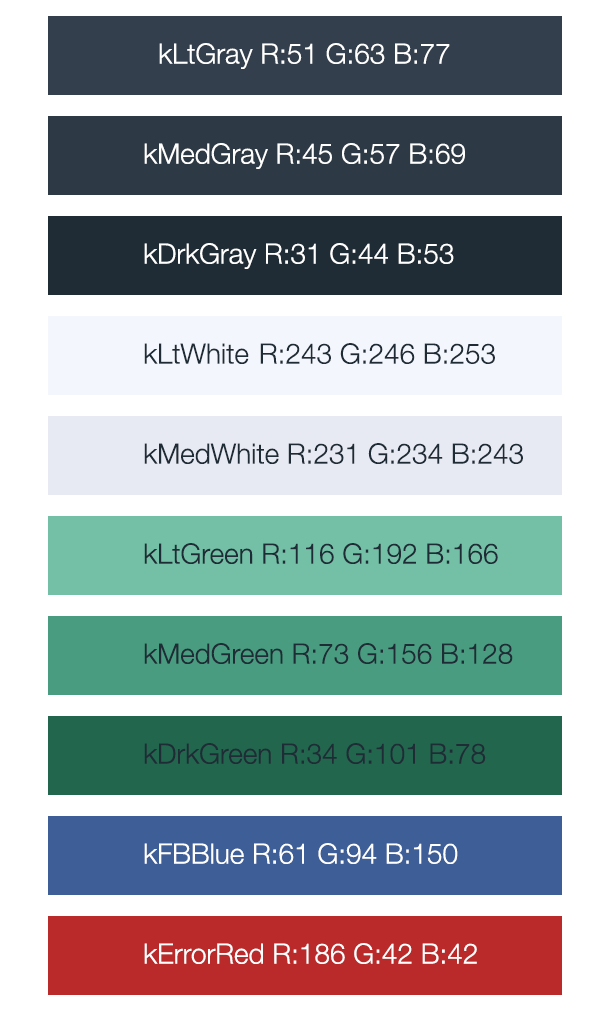
<style>
.page{position:relative;width:609px;height:1024px;background:#ffffff}
.page>*{position:absolute;margin:0}
.t1{font:28px "HelveticaNeue-Light";color:#ffffff}
.t2{font:28px "HelveticaNeue-Light";color:#1f2c35}
</style>
<div class="page">
<p class="t1" style="left:159px;top:43px;width:291px;height:26px">kLtGray R:51 G:63 B:77</p>
<p class="t1" style="left:144px;top:143px;width:321px;height:26px">kMedGray R:45 G:57 B:69</p>
<p class="t1" style="left:144px;top:243px;width:310px;height:26px">kDrkGray R:31 G:44 B:53</p>
<p class="t2" style="left:144px;top:343px;width:351px;height:21px">kLtWhite  R:243 G:246 B:253</p>
<p class="t2" style="left:144px;top:443px;width:379px;height:21px">kMedWhite R:231 G:234 B:243</p>
<p class="t2" style="left:144px;top:543px;width:354px;height:21px">kLtGreen R:116 G:192 B:166</p>
<p class="t2" style="left:144px;top:643px;width:369px;height:21px">kMedGreen R:73 G:156 B:128</p>
<p class="t2" style="left:144px;top:743px;width:342px;height:21px">kDrkGreen R:34 G:101 B:78</p>
<p class="t1" style="left:144px;top:843px;width:314px;height:21px">kFBBlue R:61 G:94 B:150</p>
<p class="t1" style="left:144px;top:943px;width:333px;height:21px">kErrorRed R:186 G:42 B:42</p>
</div>
